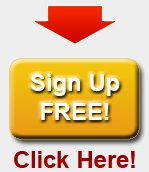
<style>
.page{position:relative;width:149px;height:172px;background:#eeeeee}
.page>*{position:absolute;margin:0}
.t1{font:24px "Arial-BoldMT";color:#ffffff}
.t2{font:24px "Arial-BoldMT";color:#9c0000}
</style>
<div class="page">
<p class="t1" style="left:30px;top:74px;width:90px;height:46px;text-align:center">Sign Up<br>FREE!</p>
<p class="t2" style="left:14px;top:151px;width:121px;height:17px">Click Here!</p>
</div>
